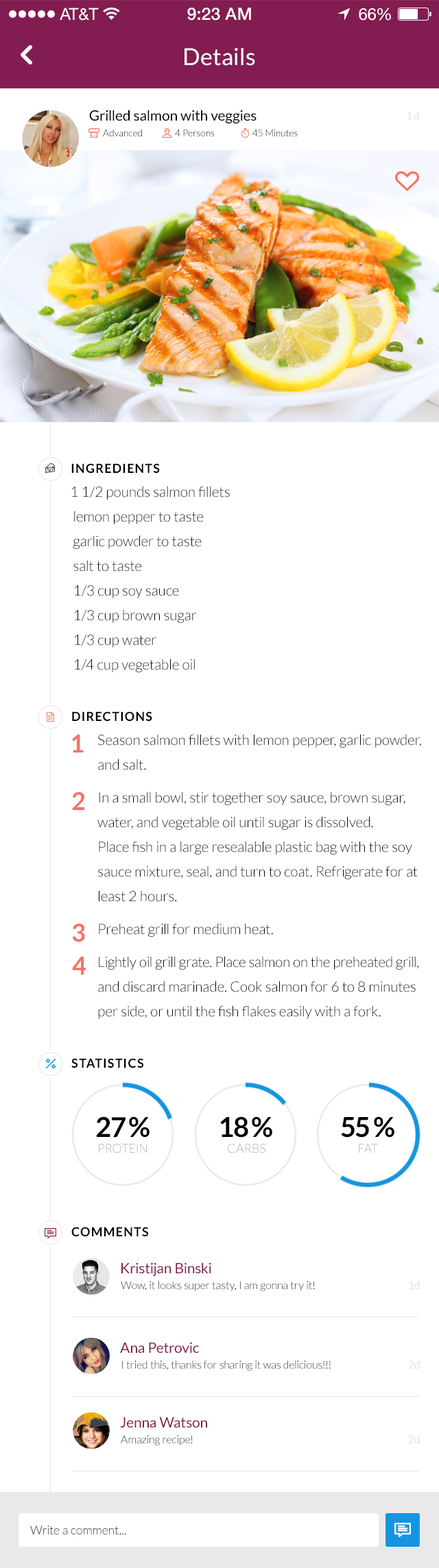
<style>
.page{position:relative;width:439px;height:1568px;background:#ffffff}
.page>*{position:absolute;margin:0}
.t1{font:16.4px "HelveticaNeue";color:#ffffff}
.t2{font:17.1px "HelveticaNeue-Medium";color:#ffffff}
.t3{font:16.4px "HelveticaNeue";letter-spacing:-0.02em;color:#ffffff}
.t4{font:23.3px "Lato-Regular";letter-spacing:0.01em;color:#ffffff}
.t5{font:14.4px "Lato-Regular";color:#000000}
.t6{font:9.6px "Lato-Light"}
.t7{font:9.6px "Lato-Light";color:#000000}
.t8{font:12.3px "Lato-Bold";letter-spacing:0.075em;color:#000000}
.t9{font:14.4px/24.7px "Lato-Light";color:#000000}
.t10{font:24.7px "Lato-Bold";letter-spacing:-0.01em;color:#f57365}
.t11{font:14.4px/32.9px "Lato-Light";color:#000000}
.t12{font:14.4px/32.9px "Lato-Light";letter-spacing:-0.01em;color:#000000}
.t13{font:27.4px "Lato-Bold";color:#000000}
.t14{font:12.3px "Lato-Light";color:#aaaaaa}
.t15{font:12.3px "Lato-Light";color:#a9a9a9}
.t16{font:14.4px "Lato-Regular";color:#831c51}
.t17{font:11px "Lato-Light";color:#000000}
.t18{font:11px "Lato-Light"}
.t19{font:12.3px "Lato-Light";color:#000000}
</style>
<div class="page">
<p class="t1" style="left:60px;top:8px;width:39px;height:13px">AT&amp;T</p>
<p class="t2" style="left:187px;top:8px;width:64px;height:13px">9:23 AM</p>
<p class="t1" style="left:358px;top:8px;width:33px;height:13px">6<span class="t3">6</span>%</p>
<p class="t4" style="left:184px;top:48px;width:71px;height:18px">Details</p>
<p class="t5" style="left:89px;top:110px;width:167px;height:14px">Grilled salmon with veggies</p>
<p class="t6" style="left:407px;top:112px;width:12px;height:7px">1 d</p>
<p class="t7" style="left:103px;top:130px;width:39px;height:6px">Advanced</p>
<p class="t6" style="left:175px;top:130px;width:40px;height:6px">4 Persons</p>
<p class="t6" style="left:252px;top:130px;width:45px;height:6px">45 Minutes</p>
<p class="t8" style="left:71px;top:463px;width:89px;height:10px">INGREDIENTS</p>
<p class="t9" style="left:71px;top:486px;width:159px;height:186px">1 1/2 pounds salmon fillets<br> lemon pepper to taste<br> garlic powder to taste<br> salt to taste<br> 1/3 cup soy sauce<br> 1/3 cup brown sugar<br> 1/3 cup water<br> 1/4 cup vegetable oil</p>
<p class="t8" style="left:72px;top:711px;width:80px;height:10px">DIRECTIONS</p>
<p class="t10" style="left:72px;top:735px;width:12px;height:17px">1</p>
<p class="t9" style="left:97px;top:734px;width:324px;height:285px">Season salmon fillets with lemon pepper, garlic powder, <br>and salt.<br><span class="t11">In a small bowl, stir together soy sauce, brown sugar, <br></span>water, and vegetable oil until sugar is dissolved. <br>Place fish in a large resealable plastic bag with the soy <br>sauce mixture, seal, and turn to coat. Refrigerate for at <br>least 2 hours.<br><span class="t11">Preheat grill for medium heat.<br></span><span class="t12">Lightly oil grill grate. Place salmon on the preheated grill, <br></span>and discard marinade. Cook salmon for 6 to 8 minutes <br>per side, or until the fish flakes easily with a fork.</p>
<p class="t10" style="left:72px;top:792px;width:13px;height:18px">2</p>
<p class="t10" style="left:72px;top:923px;width:13px;height:19px">3</p>
<p class="t10" style="left:72px;top:957px;width:14px;height:18px">4</p>
<p class="t8" style="left:71px;top:1058px;width:72px;height:10px">STATISTICS</p>
<p class="t13" style="left:96px;top:1116px;width:29px;height:22px">27</p>
<p class="t13" style="left:129px;top:1116px;width:20px;height:22px">%</p>
<p class="t13" style="left:220px;top:1116px;width:28px;height:22px">18</p>
<p class="t13" style="left:252px;top:1116px;width:20px;height:22px">%</p>
<p class="t13" style="left:341px;top:1117px;width:28px;height:21px">55</p>
<p class="t13" style="left:373px;top:1116px;width:21px;height:22px">%</p>
<p class="t14" style="left:99px;top:1144px;width:48px;height:9px">PROTEIN</p>
<p class="t15" style="left:228px;top:1144px;width:37px;height:9px">CARBS</p>
<p class="t15" style="left:358px;top:1144px;width:20px;height:9px">FAT</p>
<p class="t8" style="left:71px;top:1227px;width:77px;height:9px">COMMENTS</p>
<p class="t16" style="left:121px;top:1262px;width:90px;height:14px">Kristijan Binski</p>
<p class="t17" style="left:121px;top:1281px;width:194px;height:10px">Wow, it looks super tasty, I am gonna try it!</p>
<p class="t18" style="left:408px;top:1281px;width:11px;height:8px">1d</p>
<p class="t16" style="left:120px;top:1342px;width:79px;height:11px">Ana Petrovic</p>
<p class="t17" style="left:122px;top:1360px;width:208px;height:11px">I tried this, thanks for sharing it was delicious!!!</p>
<p class="t18" style="left:408px;top:1360px;width:11px;height:9px">2d</p>
<p class="t16" style="left:120px;top:1417px;width:87px;height:11px">Jenna Watson</p>
<p class="t17" style="left:121px;top:1435px;width:72px;height:10px">Amazing recipe!</p>
<p class="t18" style="left:408px;top:1435px;width:11px;height:8px">2d</p>
<p class="t19" style="left:30px;top:1526px;width:96px;height:9px">Write a comment...</p>
</div>
